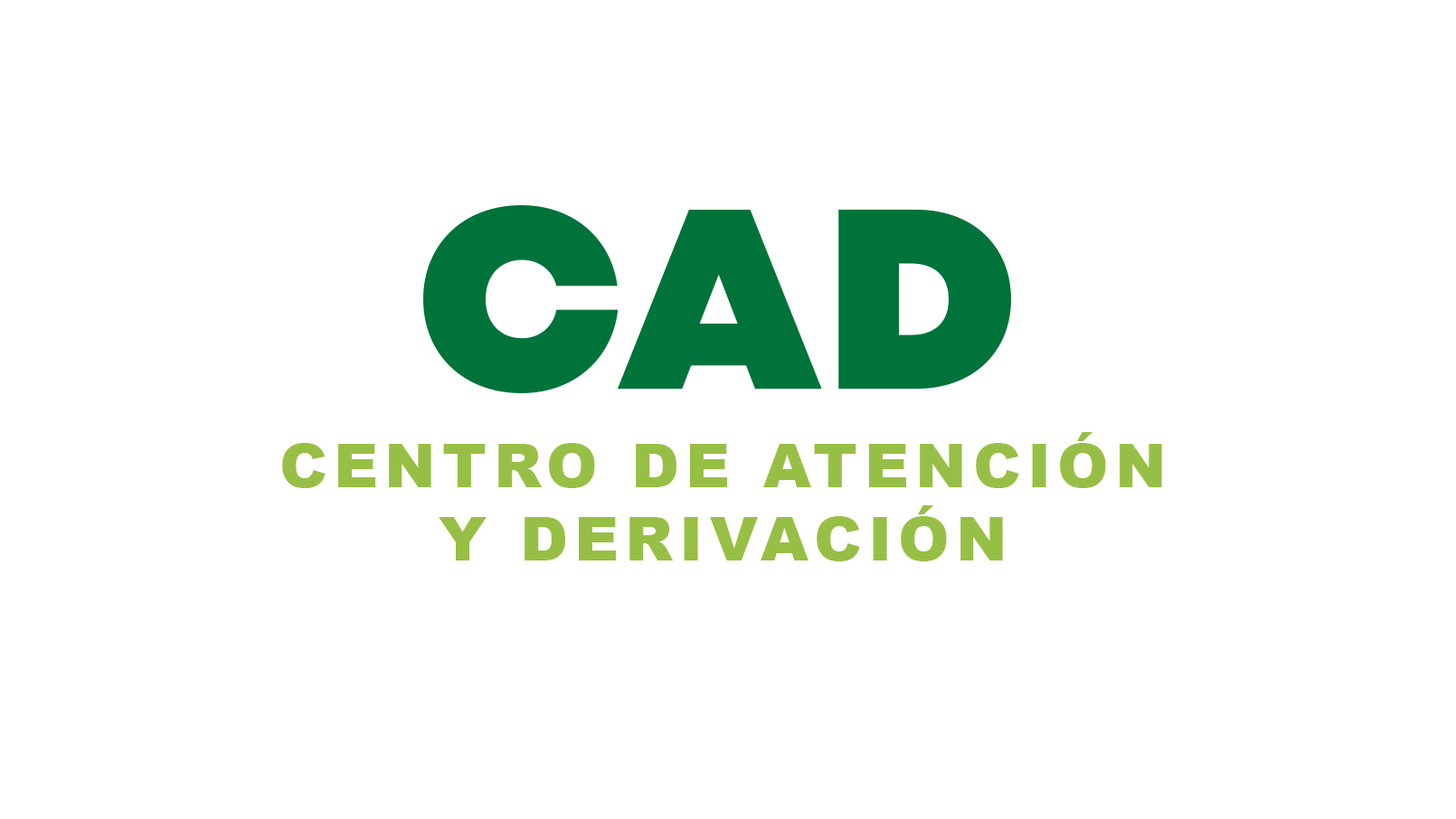
<style>
.page{position:relative;width:1456px;height:819px;background:#ffffff}
.page>*{position:absolute;margin:0}
.t1{font:60.7px/98.6px "Arial-Black";letter-spacing:0.1em;color:#98bf45}
.t2{font:255.9px/98.6px "MontBlanc-Trial-Black";letter-spacing:-0.02em;color:#00733a}
.t3{font:255.9px/98.6px "MontBlanc-Trial-Black";letter-spacing:0.02em;color:#00733a}
.t4{font:60.7px "Arial-Black";letter-spacing:0.1em;color:#98bf45}
</style>
<div class="page">
<p class="t1" style="left:282px;top:205px;width:880px;height:356px;text-align:center"><span class="t2">C</span><span class="t3">AD<br></span>CENTRO DE ATENCIÓN<br><span class="t4">Y DERIVACIÓN</span></p>
</div>
